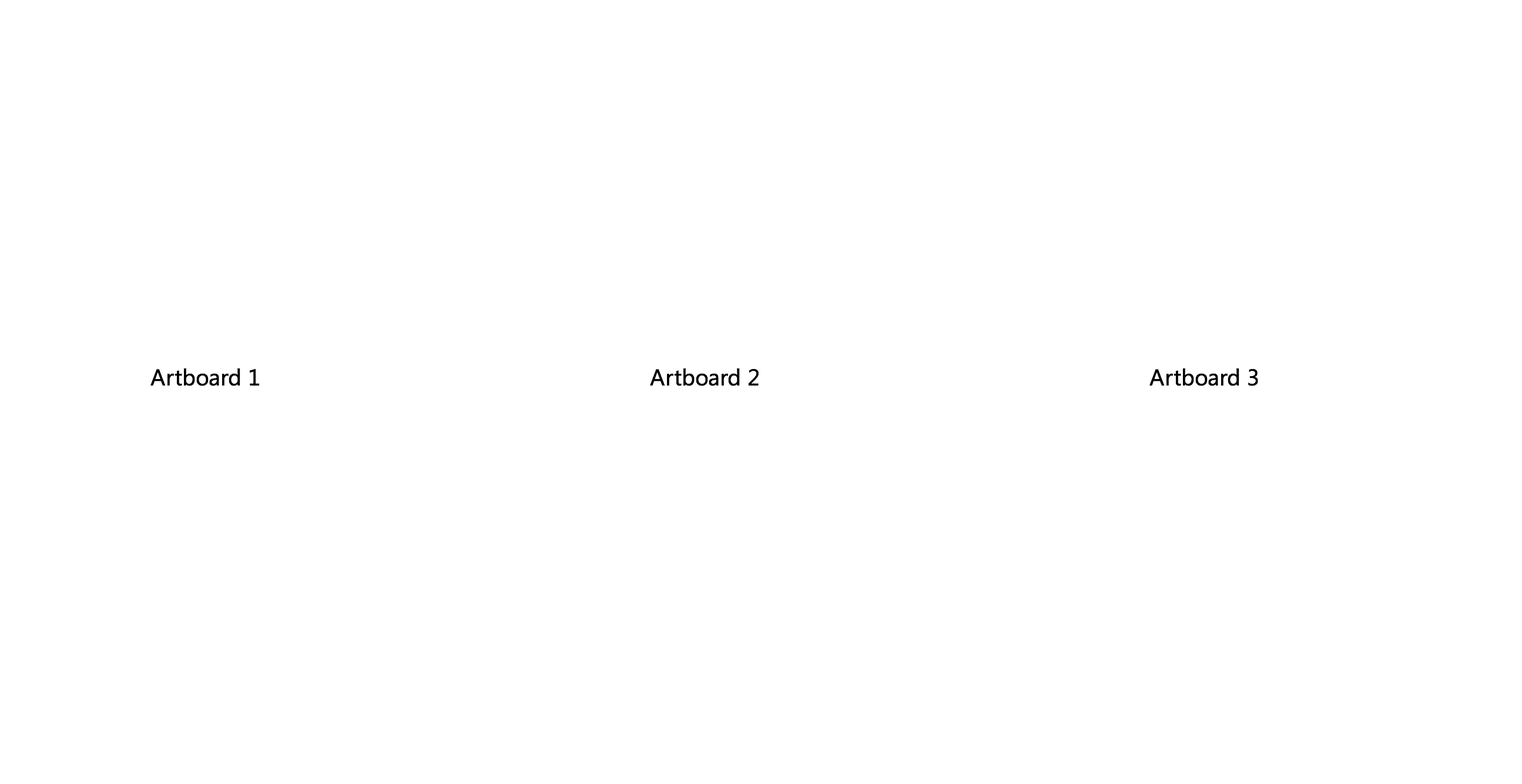
<style>
.page{position:relative;width:1522px;height:784px;background:#ffffff}
.page>*{position:absolute;margin:0}
.t1{font:21.1px "MicrosoftYaHei";color:#000000}
</style>
<div class="page">
<p class="t1" style="left:150px;top:368px;width:110px;height:18px">Artboard 1</p>
<p class="t1" style="left:650px;top:368px;width:108px;height:18px">Artboard 2</p>
<p class="t1" style="left:1149px;top:368px;width:109px;height:18px">Artboard 3</p>
</div>
